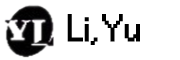
<style>
.page{position:relative;width:180px;height:60px;background:#ffffff}
.page>*{position:absolute;margin:0}
.t1{font:36px "Small Fonts";color:#000000;font-weight:bold}
</style>
<div class="page">
<p class="t1" style="left:67px;top:14px;width:73px;height:31px">Li, Yu</p>
</div>
